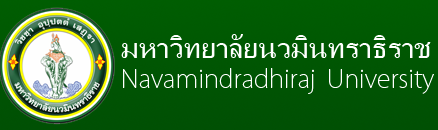
<style>
.page{position:relative;width:438px;height:130px}
.page>*{position:absolute;margin:0}
.t1{font:25px "KozGoPro-ExtraLight";color:#ffffff}
.t2{font:30px "MicrosoftSansSerif";color:#ffffff}
</style>
<div class="page">
<p class="t1" style="left:121px;top:34px;width:313px;height:60px"><span class="t2">มหาวิทยาลัยนวมินทราธิราช<br></span>Navamindradhiraj  University</p>
</div>
